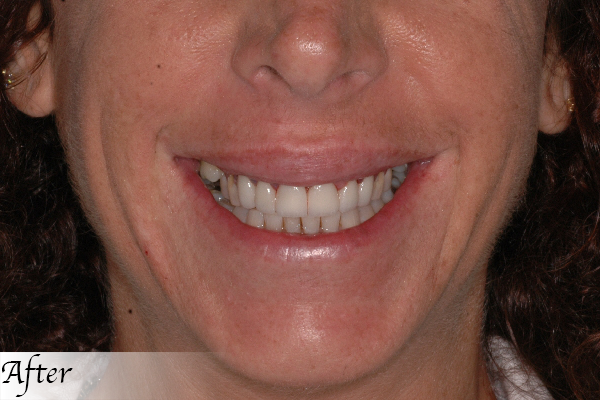
<style>
.page{position:relative;width:600px;height:400px}
.page>*{position:absolute;margin:0}
.t1{font:56px "Apple-Chancery";color:#000000}
</style>
<div class="page">
<p class="t1" style="left:2px;top:354px;width:71px;height:43px">After</p>
</div>
